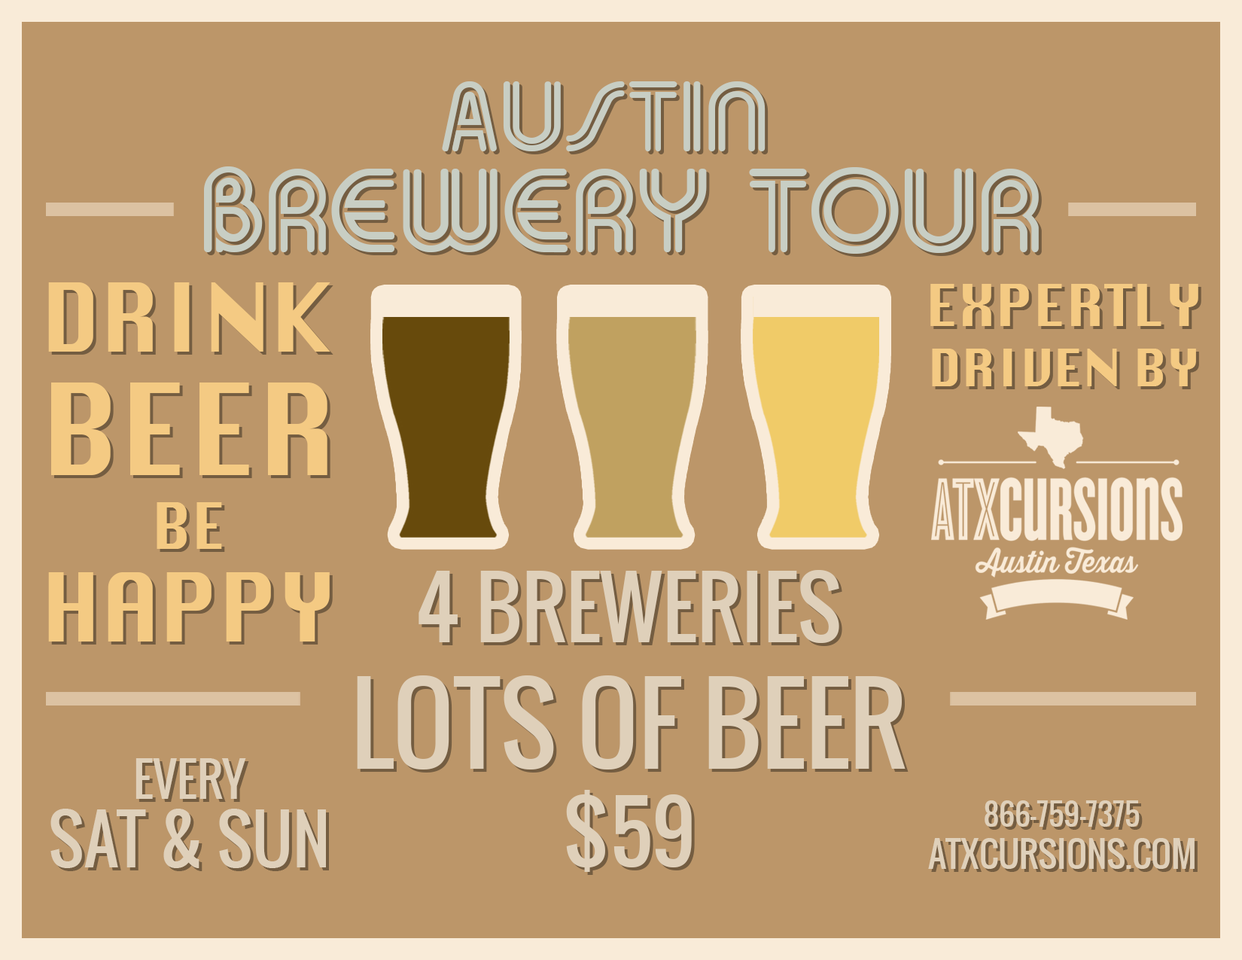
<style>
.page{position:relative;width:1242px;height:960px;background:#bc9669}
.page>*{position:absolute;margin:0}
.t1{font:121.1px/100.9px "Duo-Line";color:#c8cec4;text-transform:uppercase}
.t2{font:100.9px "Duo-Line";color:#c8cec4;text-transform:uppercase}
.t3{font:92.5px/123.4px "Silom";color:#f4ca83;text-transform:uppercase;scale:0.96 1}
.t4{font:123.4px/123.4px "Silom";color:#f4ca83;text-transform:uppercase;scale:0.96 1}
.t5{font:61.7px "Silom";color:#f4ca83;text-transform:uppercase;scale:0.96 1}
.t6{font:92.5px/92.5px "Silom";color:#f4ca83;text-transform:uppercase;scale:0.96 1}
.t7{font:50.2px "Silom";color:#f4ca83;text-transform:uppercase}
.t8{font:56.5px "Silom";color:#f4ca83;text-transform:uppercase}
.t9{font:105.3px "Oswald-Regular";color:#dfd0ba;text-transform:uppercase}
.t10{font:81.9px "Oswald-Regular";color:#dfd0ba;text-transform:uppercase}
.t11{font:66.3px/69px "Oswald-Regular";color:#dfd0ba;text-transform:uppercase}
.t12{font:47px/69px "Oswald-Regular";color:#dfd0ba;text-transform:uppercase}
.t13{font:35px "Oswald-Regular";color:#dfd0ba;text-transform:uppercase}
.t14{font:30px "Oswald-Regular";color:#dfd0ba;text-transform:uppercase}
</style>
<div class="page">
<p class="t1" style="left:204px;top:81px;width:835px;height:173px;text-align:center"><span class="t2">Austin <br></span>Brewery Tour</p>
<p class="t3" style="left:48px;top:282px;width:283px;height:359px;text-align:center">Drink<br><span class="t4">beer<br></span><span class="t5">Be<br></span><span class="t6">happy</span></p>
<p class="t7" style="left:931px;top:284px;width:268px;height:102px;text-align:center"><span class="t8">Expertly<br></span>Driven by</p>
<p class="t9" style="left:357px;top:570px;width:549px;height:302px;text-align:center"><span class="t10">4 Breweries<br></span>Lots of beer<br><span class="t10">$59</span></p>
<p class="t11" style="left:50px;top:758px;width:276px;height:110px;text-align:center"><span class="t12">Every<br></span>Sat &amp; Sun</p>
<p class="t13" style="left:928px;top:800px;width:267px;height:69px;text-align:center"><span class="t14">866-759-7375<br></span>ATXCURSIONS.com</p>
</div>
